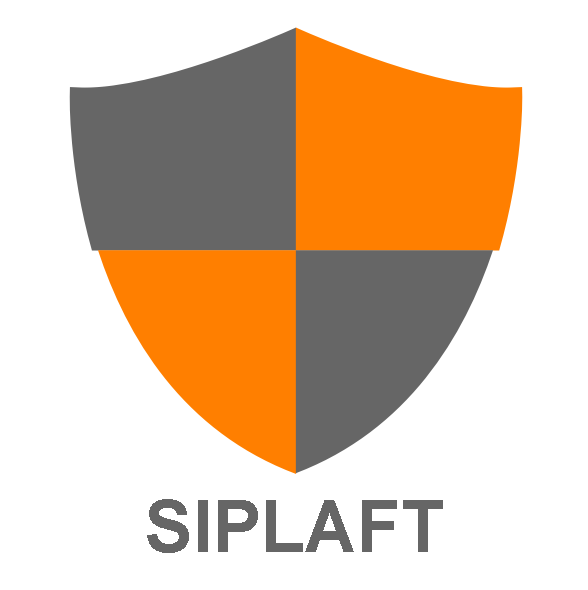
<style>
.page{position:relative;width:588px;height:590px;background:#ffffff}
.page>*{position:absolute;margin:0}
.t1{font:72px "Arial-BoldMT";color:#666666}
</style>
<div class="page">
<p class="t1" style="left:147px;top:499px;width:296px;height:54px">SIPLAFT</p>
</div>
